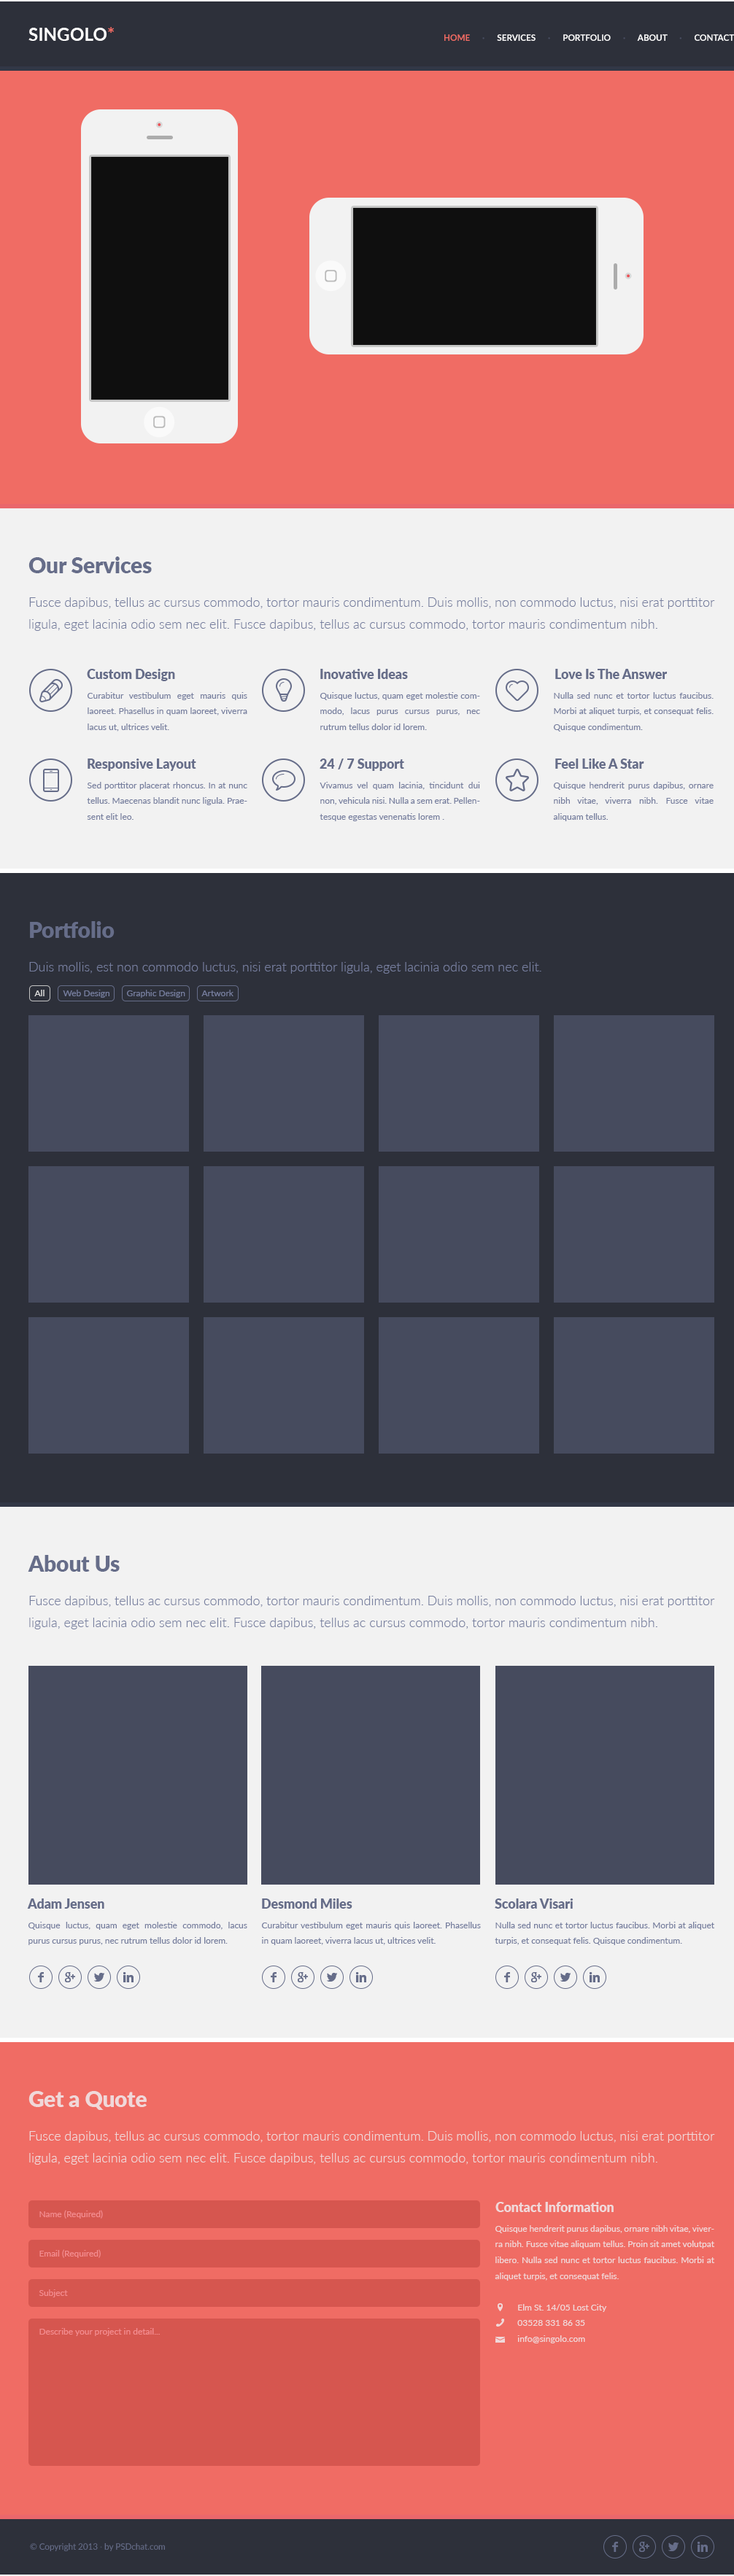
<style>
.page{position:relative;width:734px;height:2576px;background:#f2f2f2}
.page>*{position:absolute;margin:0}
.t1{font:18.2px "Lato-Bold";color:#ffffff}
.t2{font:18.2px "Lato-Bold";color:#f06c64}
.t3{font:8.8px "Lato-Bold";color:#ffffff}
.t4{font:8.8px "Lato-Bold";color:#f06c64}
.t5{font:8.8px "Lato-Bold";color:#494e62}
.t6{font:21.9px "Lato-Black";color:#666d89}
.t7{font:13.1px/21.9px "Lato-Light";color:#767e9e}
.t8{font:13.1px "Lato-Black";color:#666d89}
.t9{font:8.8px/15.7px "Lato-Regular";color:#767e9e}
.t10{font:13.1px "Lato-Light";color:#767e9e}
.t11{font:8.8px "Lato-Regular";color:#dedede}
.t12{font:8.8px "Lato-Regular";color:#767e9e}
.t13{font:21.9px "Lato-Black";color:#f0d8d9}
.t14{font:13.1px/21.9px "Lato-Light";color:#f0d8d9}
.t15{font:13.1px "Lato-Black";color:#f0d8d9}
.t16{font:8.8px "Lato-Regular";color:#f48c8f}
.t17{font:8.8px/15.7px "Lato-Regular";color:#f0d8d9}
.t18{font:8.8px "Lato-Regular";color:#666d89}
.t19{font:8.8px "Lato-Regular";color:#494e62}
</style>
<div class="page">
<p class="t1" style="left:28px;top:27px;width:86px;height:14px">SINGOLO<span class="t2">*</span></p>
<p class="t3" style="left:444px;top:34px;width:290px;height:7px"><span class="t4">HOME      </span><span class="t5">·      </span>SERVICES      <span class="t5">·</span>      PORTFOLIO      <span class="t5">·</span>      ABOUT      <span class="t5">·</span>      CONTACT</p>
<p class="t6" style="left:28px;top:556px;width:124px;height:17px">Our Services</p>
<p class="t7" style="left:29px;top:597px;width:686px;height:34px;text-align:justify">Fusce dapibus, tellus ac cursus commodo, tortor mauris condimentum. Duis mollis, non commodo luctus, nisi erat porttitor ligula, eget lacinia odio sem nec elit. Fusce dapibus, tellus ac cursus commodo, tortor mauris condimentum nibh.</p>
<p class="t8" style="left:87px;top:669px;width:88px;height:12px">Custom Design</p>
<p class="t8" style="left:320px;top:669px;width:88px;height:10px">Inovative Ideas</p>
<p class="t8" style="left:555px;top:669px;width:112px;height:10px">Love Is The Answer</p>
<p class="t9" style="left:87px;top:692px;width:160px;height:40px;text-align:justify">Curabitur vestibulum eget mauris quis laoreet. Phasellus in quam laoreet, viverra lacus ut, ultrices velit.</p>
<p class="t9" style="left:319px;top:692px;width:161px;height:38px;text-align:justify">Quisque luctus, quam eget molestie commodo, lacus purus cursus purus, nec rutrum tellus dolor id lorem.</p>
<p class="t9" style="left:553px;top:692px;width:160px;height:40px;text-align:justify">Nulla sed nunc et tortor luctus faucibus. Morbi at aliquet turpis, et consequat felis. Quisque condimentum.</p>
<p class="t8" style="left:88px;top:759px;width:108px;height:12px">Responsive Layout</p>
<p class="t8" style="left:319px;top:759px;width:85px;height:12px">24 / 7 Support</p>
<p class="t8" style="left:555px;top:759px;width:89px;height:10px">Feel Like A Star</p>
<p class="t9" style="left:87px;top:782px;width:160px;height:38px;text-align:justify">Sed porttitor placerat rhoncus. In at nunc tellus. Maecenas blandit nunc ligula. Praesent elit leo.</p>
<p class="t9" style="left:319px;top:782px;width:161px;height:39px;text-align:justify">Vivamus vel quam lacinia, tincidunt dui non, vehicula nisi. Nulla a sem erat. Pellentesque egestas venenatis lorem .</p>
<p class="t9" style="left:553px;top:782px;width:160px;height:39px;text-align:justify">Quisque hendrerit purus dapibus, ornare nibh vitae, viverra nibh. Fusce vitae aliquam tellus.</p>
<p class="t6" style="left:30px;top:921px;width:85px;height:17px">Portfolio</p>
<p class="t10" style="left:29px;top:962px;width:512px;height:12px">Duis mollis, est non commodo luctus, nisi erat porttitor ligula, eget lacinia odio sem nec elit.</p>
<p class="t11" style="left:34px;top:990px;width:10px;height:6px">All</p>
<p class="t12" style="left:63px;top:990px;width:46px;height:8px">Web Design</p>
<p class="t12" style="left:126px;top:990px;width:59px;height:8px">Graphic Design</p>
<p class="t12" style="left:201px;top:990px;width:32px;height:6px">Artwork</p>
<p class="t6" style="left:28px;top:1555px;width:92px;height:17px">About Us</p>
<p class="t7" style="left:29px;top:1596px;width:686px;height:33px;text-align:justify">Fusce dapibus, tellus ac cursus commodo, tortor mauris condimentum. Duis mollis, non commodo luctus, nisi erat porttitor ligula, eget lacinia odio sem nec elit. Fusce dapibus, tellus ac cursus commodo, tortor mauris condimentum nibh.</p>
<p class="t8" style="left:27px;top:1898px;width:77px;height:11px">Adam Jensen</p>
<p class="t8" style="left:262px;top:1898px;width:90px;height:11px">Desmond Miles</p>
<p class="t8" style="left:494px;top:1898px;width:79px;height:11px">Scolara Visari</p>
<p class="t9" style="left:28px;top:1922px;width:219px;height:23px;text-align:justify">Quisque luctus, quam eget molestie commodo, lacus purus cursus purus, nec rutrum tellus dolor id lorem.</p>
<p class="t9" style="left:261px;top:1922px;width:220px;height:23px;text-align:justify">Curabitur vestibulum eget mauris quis laoreet. Phasellus in quam laoreet, viverra lacus ut, ultrices velit.</p>
<p class="t9" style="left:494px;top:1922px;width:221px;height:23px;text-align:justify">Nulla sed nunc et tortor luctus faucibus. Morbi at aliquet turpis, et consequat felis. Quisque condimentum.</p>
<p class="t13" style="left:28px;top:2091px;width:119px;height:19px">Get a Quote</p>
<p class="t14" style="left:29px;top:2131px;width:686px;height:34px;text-align:justify">Fusce dapibus, tellus ac cursus commodo, tortor mauris condimentum. Duis mollis, non commodo luctus, nisi erat porttitor ligula, eget lacinia odio sem nec elit. Fusce dapibus, tellus ac cursus commodo, tortor mauris condimentum nibh.</p>
<p class="t15" style="left:495px;top:2202px;width:118px;height:10px">Contact Information</p>
<p class="t16" style="left:39px;top:2210px;width:64px;height:9px">Name (Required)</p>
<p class="t17" style="left:494px;top:2225px;width:221px;height:118px;text-align:justify">Quisque hendrerit purus dapibus, ornare nibh vitae, viverra nibh. Fusce vitae aliquam tellus. Proin sit amet volutpat libero. Nulla sed nunc et tortor luctus faucibus. Morbi at aliquet turpis, et consequat felis. <br><br>          Elm St. 14/05 Lost City <br>          03528 331 86 35 <br>          info@singolo.com</p>
<p class="t16" style="left:39px;top:2249px;width:62px;height:9px">Email (Required)</p>
<p class="t16" style="left:39px;top:2289px;width:29px;height:8px">Subject</p>
<p class="t16" style="left:39px;top:2328px;width:121px;height:8px">Describe your project in detail...</p>
<p class="t18" style="left:30px;top:2543px;width:135px;height:8px">© Copyright 2013 <span class="t19">·</span> by PSDchat.com</p>
</div>
